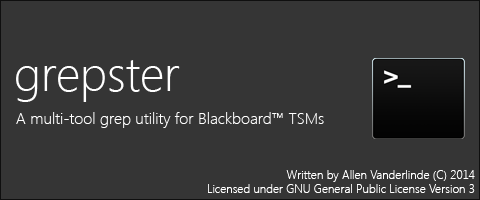
<style>
.page{position:relative;width:480px;height:200px;background:#353535}
.page>*{position:absolute;margin:0}
.t1{font:48px "SegoeUI-Light";color:#ffffff}
.t2{font:16px "SegoeUI-Light";color:#ffffff}
.t3{font:12px "SegoeUI-Light";color:#ffffff}
</style>
<div class="page">
<p class="t1" style="left:16px;top:60px;width:164px;height:42px">grepster</p>
<p class="t2" style="left:16px;top:112px;width:308px;height:16px">A multi-tool grep utility for Blackboard™ TSMs</p>
<p class="t3" style="left:208px;top:170px;width:267px;height:23px;text-align:right">Written by Allen Vanderlinde (C) 2014<br>Licensed under GNU General Public License Version 3</p>
</div>
